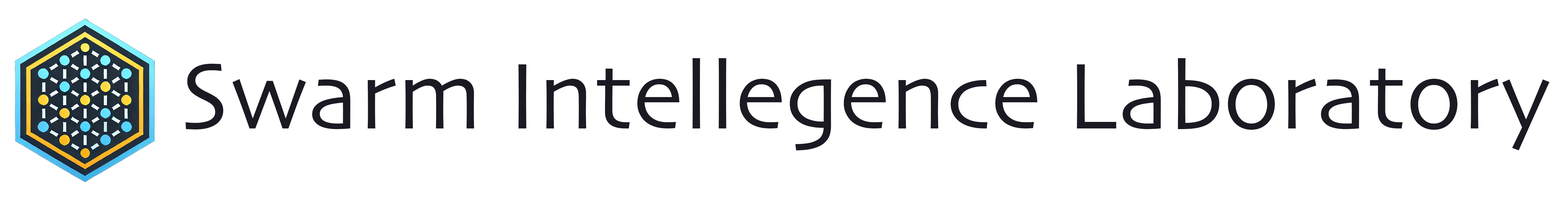
<style>
.page{position:relative;width:1568px;height:200px;background:#ffffff}
.page>*{position:absolute;margin:0}
.t1{font:98.2px "Skia-Regular";color:#1b1a23}
</style>
<div class="page">
<p class="t1" style="left:186px;top:58px;width:1364px;height:93px">Swarm Intellegence Laboratory</p>
</div>
